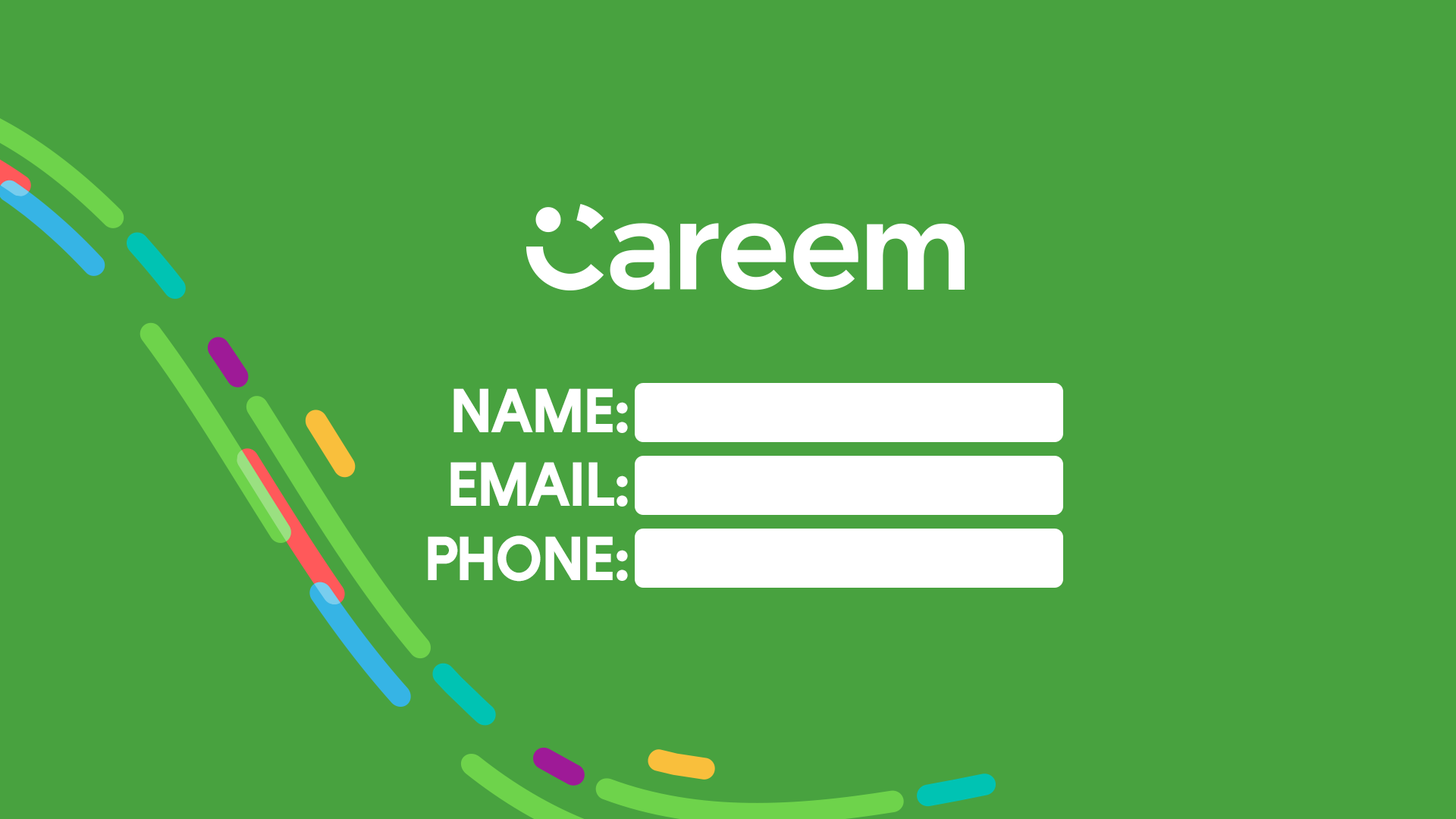
<style>
.page{position:relative;width:1456px;height:819px;background:#48a23f}
.page>*{position:absolute;margin:0}
.t1{font:61.2px "Careem-Bold";letter-spacing:-0.05em;color:#ffffff}
</style>
<div class="page">
<p class="t1" style="left:453px;top:388px;width:175px;height:45px">NAME:</p>
<p class="t1" style="left:450px;top:462px;width:178px;height:45px">EMAIL:</p>
<p class="t1" style="left:428px;top:535px;width:200px;height:47px">PHONE:</p>
</div>
